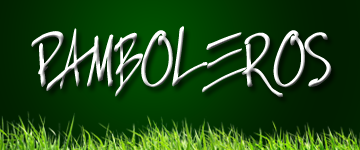
<style>
.page{position:relative;width:360px;height:150px}
.page>*{position:absolute;margin:0}
.t1{font:101.1px "EspecialKay";scale:0.65 1}
</style>
<div class="page">
<p class="t1" style="left:31px;top:26px;width:301px;height:72px">PAMBOLEROS</p>
</div>
